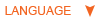
<style>
.page{position:relative;width:100px;height:20px;background:#ffffff}
.page>*{position:absolute;margin:0}
.t1{font:12px "ArialMT";color:#f26522}
</style>
<div class="page">
<p class="t1" style="left:5px;top:6px;width:66px;height:9px">LANGUAGE</p>
</div>
